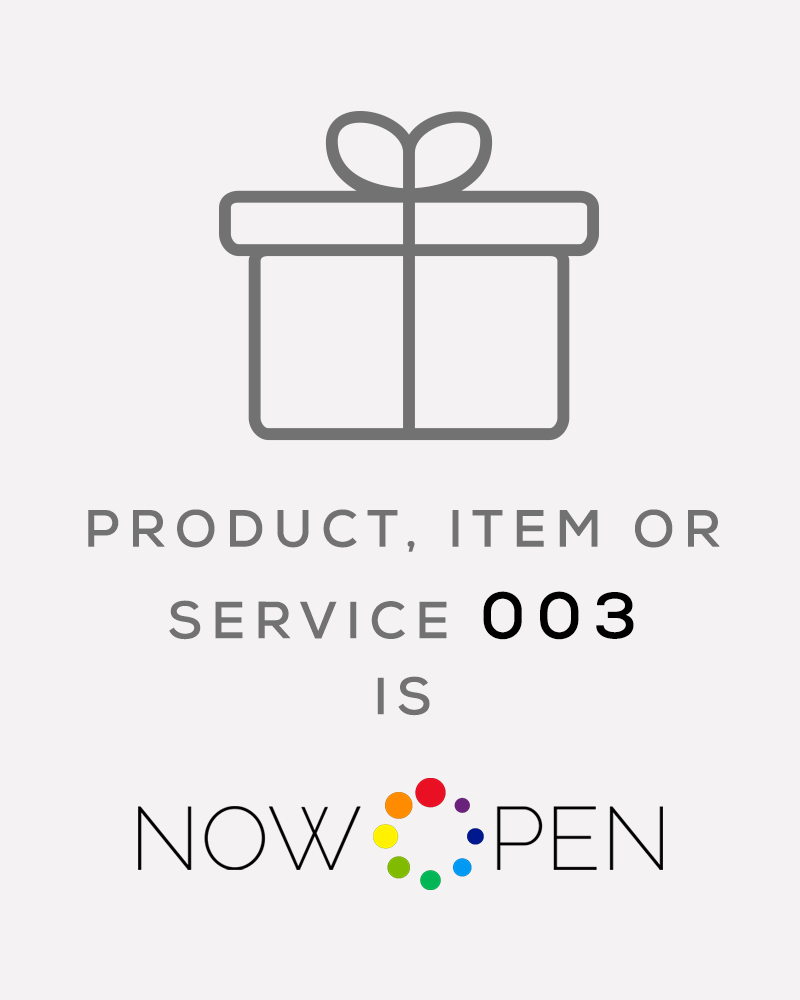
<style>
.page{position:relative;width:800px;height:1000px;background:#f4f2f3}
.page>*{position:absolute;margin:0}
.t1{font:52px "Nexa-Bold";letter-spacing:0.17em;color:#737272}
.t2{font:65px "Nexa-Bold";letter-spacing:0.17em;color:#000000}
.t3{font:89.1px "Raleway-ExtraLight";color:#020202}
</style>
<div class="page">
<p class="t1" style="left:88px;top:509px;width:632px;height:207px;text-align:center">PRODUCT, ITEM OR<br>SERVICE <span class="t2">003<br></span>IS</p>
<p class="t3" style="left:138px;top:806px;width:525px;height:64px">NOW    PEN</p>
</div>
